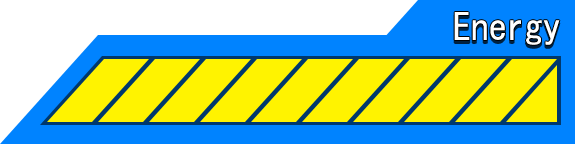
<style>
.page{position:relative;width:575px;height:144px;background:#0083ff}
.page>*{position:absolute;margin:0}
.t1{font:36.1px "MS-Gothic";color:#ffffff}
</style>
<div class="page">
<p class="t1" style="left:454px;top:12px;width:106px;height:33px">Energy</p>
</div>
